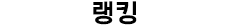
<style>
.page{position:relative;width:230px;height:25px;background:#ffffff}
.page>*{position:absolute;margin:0}
.t1{font:26px "Arita-dotum-Bold_TTF";color:#000000}
</style>
<div class="page">
<p class="t1" style="left:93px;top:1px;width:44px;height:24px">랭킹</p>
</div>
